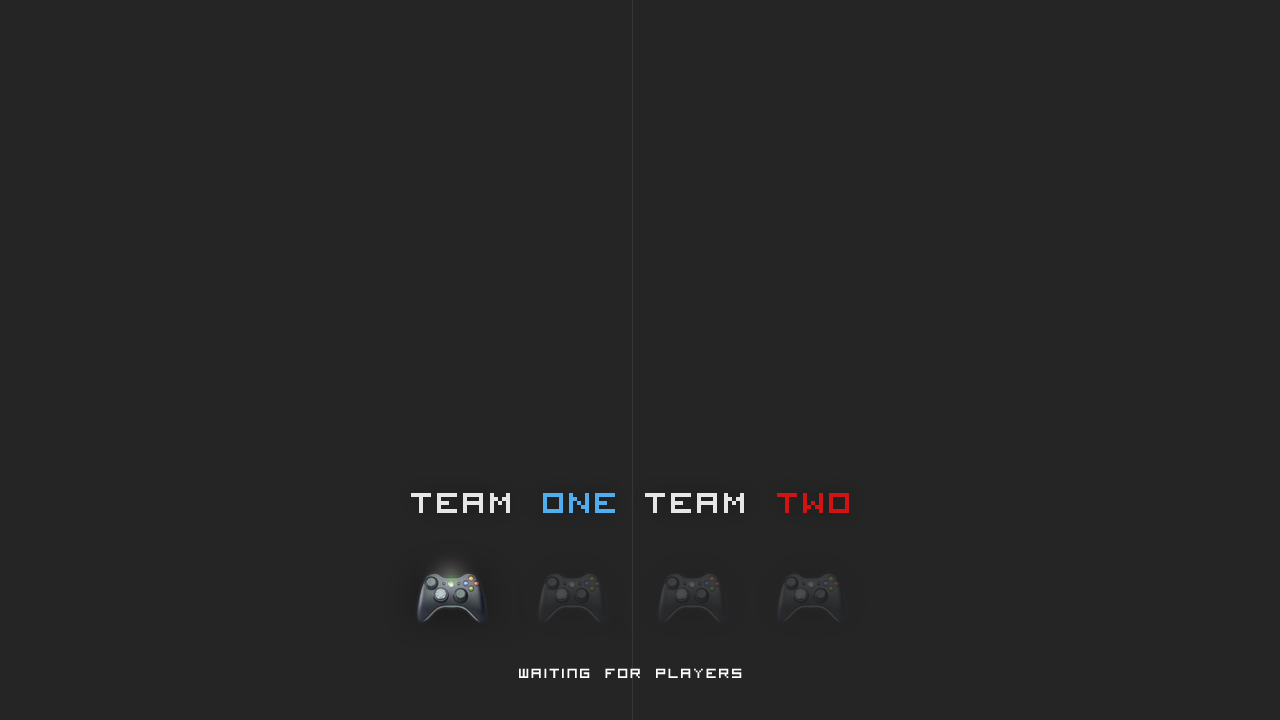
<style>
.page{position:relative;width:1280px;height:720px;background:#252525}
.page>*{position:absolute;margin:0}
.t1{font:40px "VisitorTT1BRK";letter-spacing:0.06em;color:#e6e6e6}
.t2{font:40px "VisitorTT1BRK";letter-spacing:0.06em;color:#50adee}
.t3{font:40px "VisitorTT1BRK";letter-spacing:0.06em;color:#d01414}
.t4{font:24px "VisitorTT2BRK";letter-spacing:0.06em;color:#ffffff}
</style>
<div class="page">
<p class="t1" style="left:411px;top:493px;width:204px;height:20px">TEAM <span class="t2">ONE</span></p>
<p class="t1" style="left:645px;top:493px;width:204px;height:20px">TEAM <span class="t3">TWO</span></p>
<p class="t4" style="left:519px;top:668px;width:223px;height:10px">waiting for players</p>
</div>
